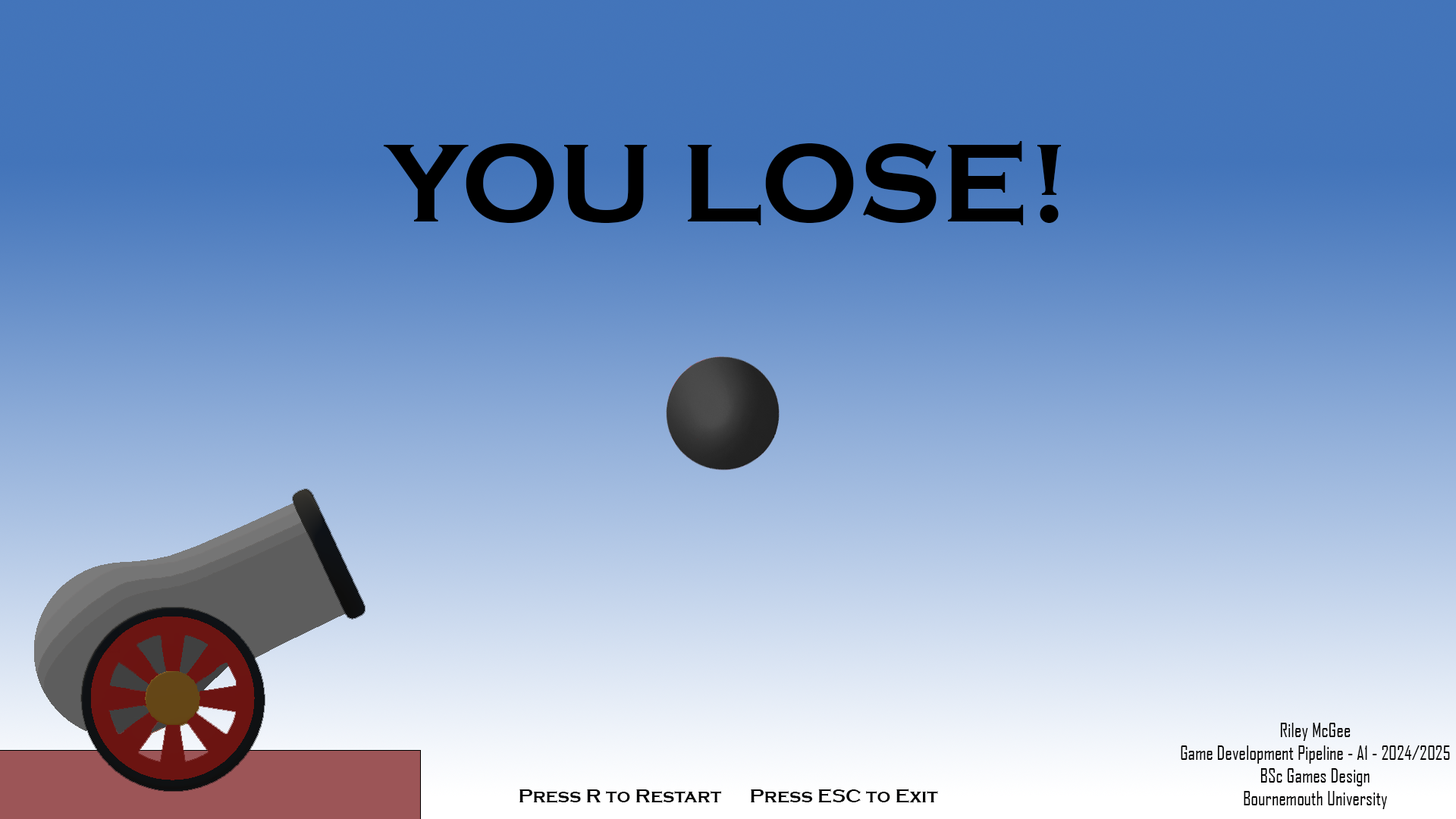
<style>
.page{position:relative;width:1456px;height:819px}
.page>*{position:absolute;margin:0}
.t1{font:114.4px "CopperplateGothic-Bold";color:#000000}
.t2{font:19px "AgencyFB-Reg";color:#000000}
.t3{font:19px "CopperplateGothic-Bold";color:#000000}
</style>
<div class="page">
<p class="t1" style="left:384px;top:141px;width:678px;height:84px">YOU LOSE!</p>
<p class="t2" style="left:1181px;top:723px;width:269px;height:86px;text-align:center">Riley McGee<br>Game Development Pipeline - A1 - 2024/2025<br>BSc Games Design<br>Bournemouth University</p>
<p class="t3" style="left:519px;top:789px;width:419px;height:14px">Press R to Restart      Press ESC to Exit</p>
</div>
